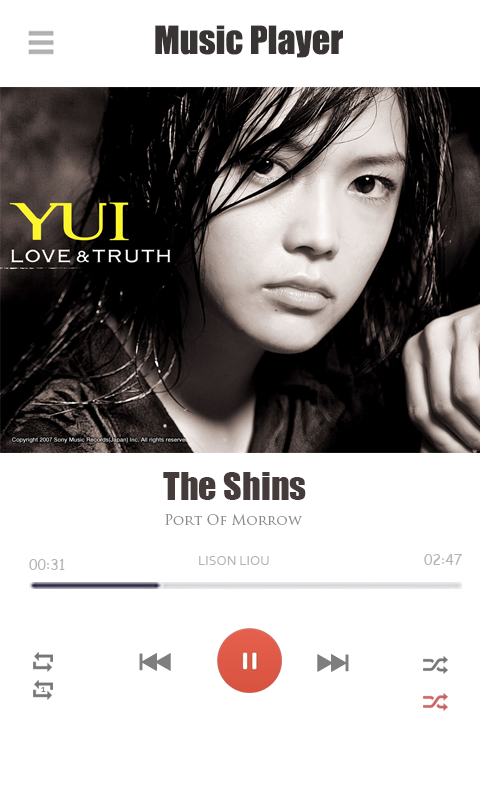
<style>
.page{position:relative;width:480px;height:800px;background:#ffffff}
.page>*{position:absolute;margin:0}
.t1{font:36px "Impact";color:#393434}
.t2{font:36px "Impact";color:#453b3b}
.t3{font:14px "TrajanPro-Regular";color:#8d8a8a}
.t4{font:14px "Corbel";color:#b5b4b4}
.t5{font:14px "ComicSansMS";color:#b5b4b4}
.t6{font:10px "Corbel";color:#8d8a8a}
</style>
<div class="page">
<p class="t1" style="left:155px;top:25px;width:188px;height:33px">Music Player</p>
<p class="t2" style="left:163px;top:472px;width:143px;height:28px">The Shins</p>
<p class="t3" style="left:165px;top:514px;width:137px;height:11px">Port Of Morrow</p>
<p class="t4" style="left:199px;top:556px;width:70px;height:9px">LISON LIOU</p>
<p class="t5" style="left:424px;top:554px;width:38px;height:11px">02:47</p>
<p class="t5" style="left:29px;top:559px;width:36px;height:11px">00:31</p>
<p class="t6" style="left:41px;top:687px;width:5px;height:5px">1</p>
</div>
